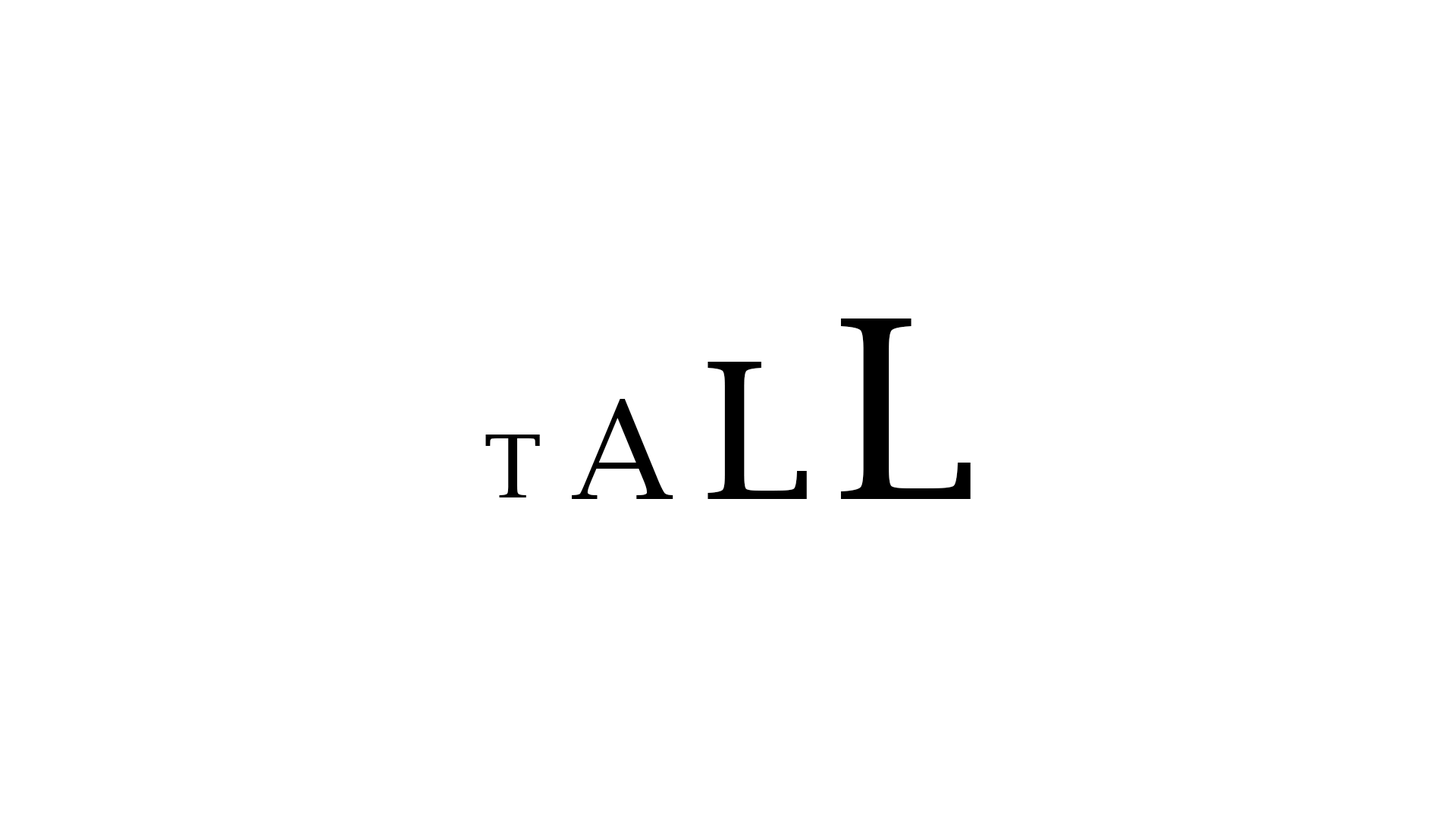
<style>
.page{position:relative;width:1456px;height:819px;background:#ffffff}
.page>*{position:absolute;margin:0}
.t1{font:249.3px "LucidaBright";color:#000000}
.t2{font:190.6px "LucidaBright";color:#000000}
.t3{font:135.9px "LucidaBright";color:#000000}
.t4{font:87.3px "LucidaBright";color:#000000}
</style>
<div class="page">
<p class="t1" style="left:840px;top:318px;width:131px;height:181px">L</p>
<p class="t2" style="left:708px;top:362px;width:99px;height:137px">L</p>
<p class="t3" style="left:572px;top:399px;width:101px;height:100px">A</p>
<p class="t4" style="left:485px;top:435px;width:55px;height:62px">T</p>
</div>
